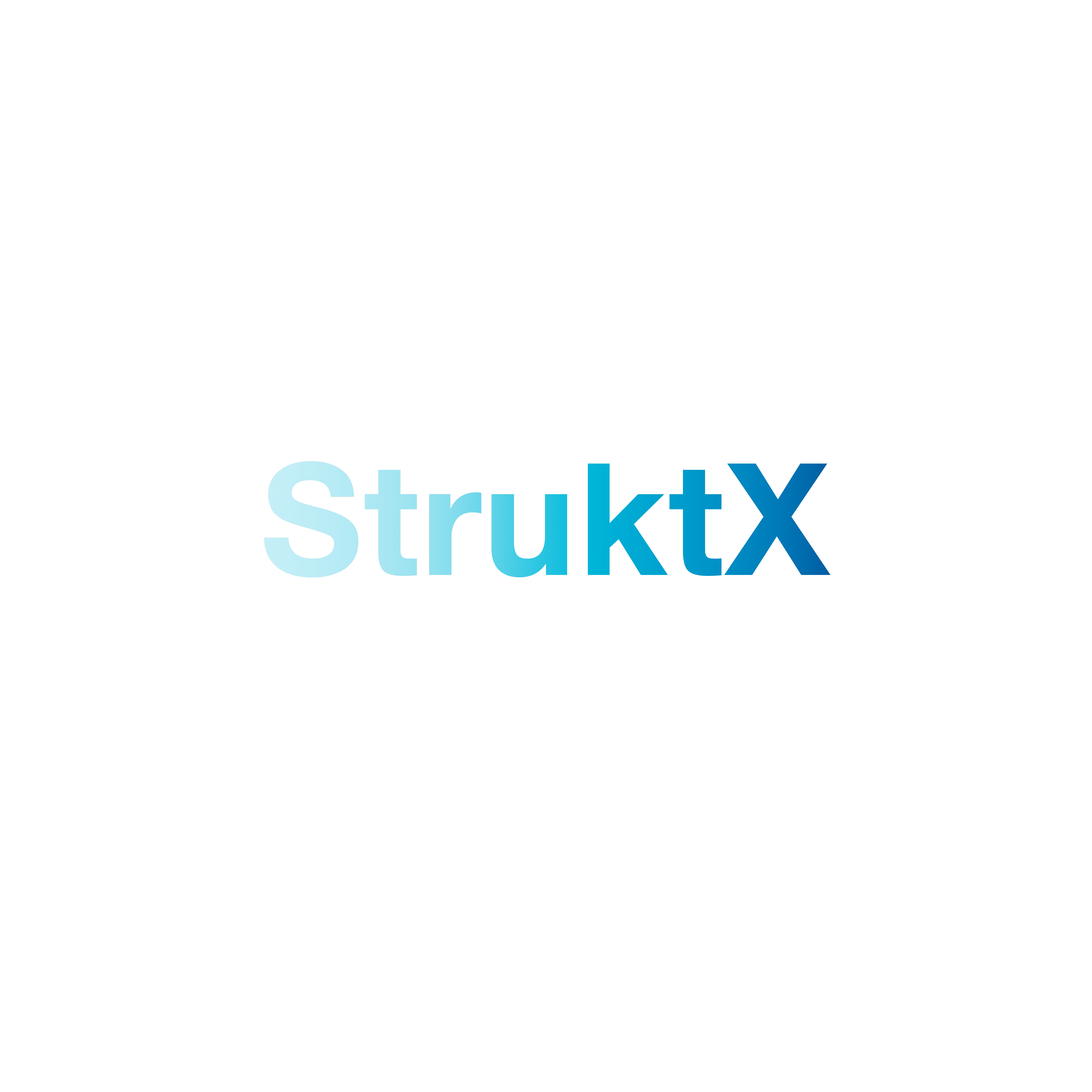
<style>
.page{position:relative;width:1092px;height:1092px;background:#ffffff}
.page>*{position:absolute;margin:0}
.t1{font:156.4px "HelveticaNeue-Bold";letter-spacing:0.01em}
</style>
<div class="page">
<p class="t1" style="left:264px;top:461px;width:567px;height:117px">StruktX</p>
</div>
